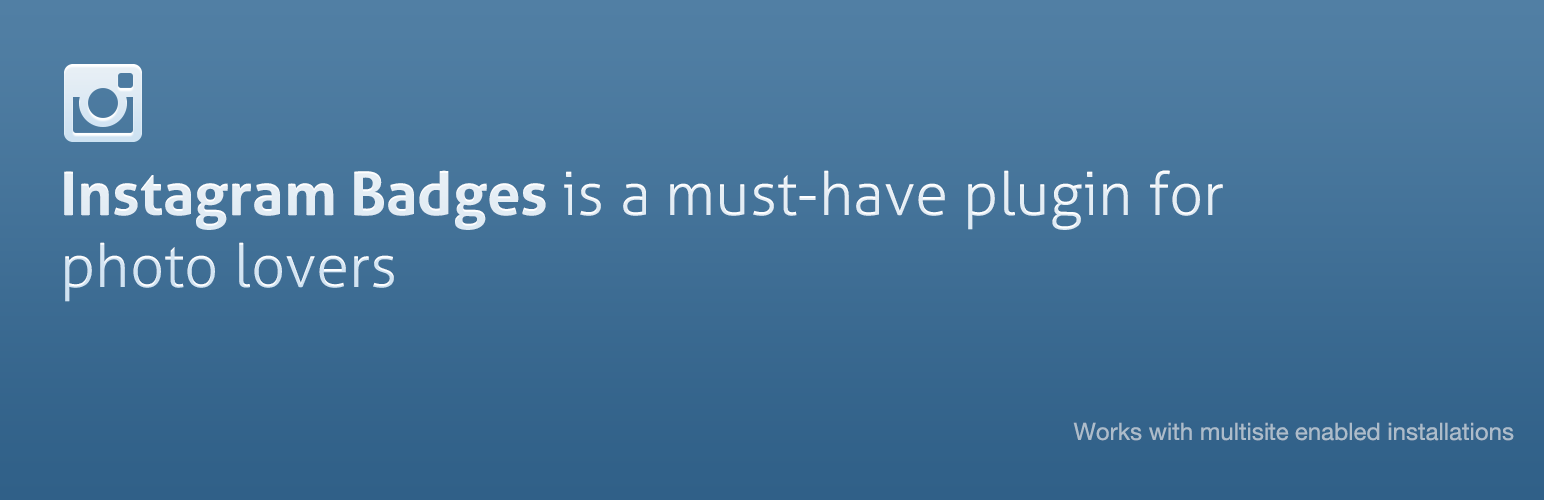
<style>
.page{position:relative;width:1544px;height:500px}
.page>*{position:absolute;margin:0}
.t1{font:60px "Aller-Light";color:#e4edf5}
.t2{font:60px "Aller-Bold";color:#e4edf5}
.t3{font:24px "HelveticaNeue";color:#adbcca}
</style>
<div class="page">
<p class="t1" style="left:64px;top:170px;width:1159px;height:132px"><span class="t2">Instagram Badges </span>is a must-have plugin for<br>photo lovers</p>
<p class="t3" style="left:1073px;top:422px;width:441px;height:19px">Works with multisite enabled installations</p>
</div>
